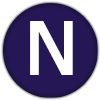
<style>
.page{position:relative;width:100px;height:100px;background:#251755}
.page>*{position:absolute;margin:0}
.t1{font:72.6px "Verdana";letter-spacing:0.05em;color:#ffffff;font-weight:bold}
</style>
<div class="page">
<p class="t1" style="left:30px;top:21px;width:43px;height:54px">N</p>
</div>
